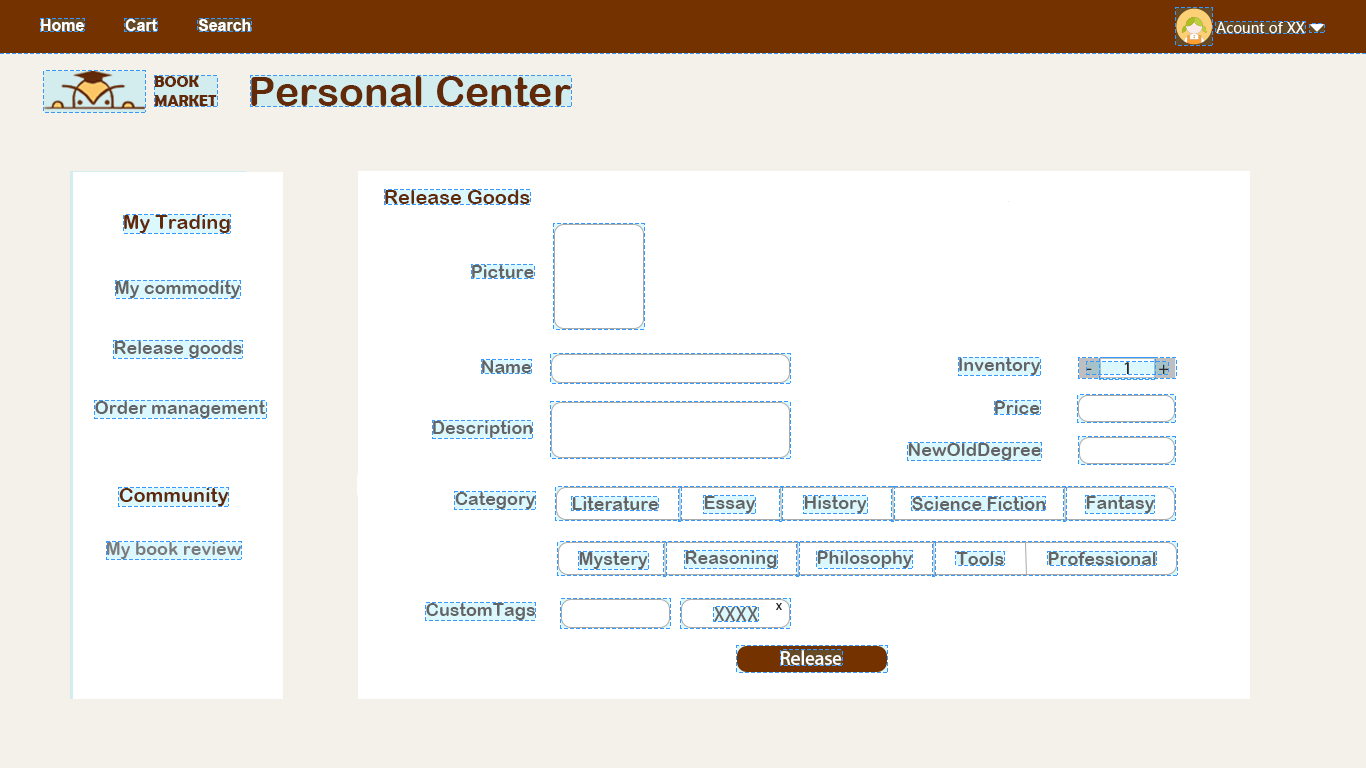
<style>
.page{position:relative;width:1366px;height:768px;background:#ffffff}
.page>*{position:absolute;margin:0}
.t1{font:16px "Arial-BoldMT";color:#ffffff}
.t2{font:14px "MicrosoftYaHeiUI";color:#ffffff}
.t3{font:15.9px/9.5px "BerlinSansFBDemi-Bold";color:#622a09}
.t4{font:40.9px "ArialRoundedMTBold";color:#622a09}
.t5{font:20px "ArialRoundedMTBold";color:#622a09}
.t6{font:18px "ArialRoundedMTBold";color:#656464}
.t7{font:15.3px "AdobeHeitiStd-Regular";color:#2a2a2a}
.t8{font:18px "ArialRoundedMTBold";color:#7c7b7b}
.t9{font:12px "AdobeHeitiStd-Regular";color:#2a2a2a}
.t10{font:18px "AdobeHeitiStd-Regular";color:#656464}
.t11{font:18px "AdobeHeitiStd-Regular";color:#ffffff}
</style>
<div class="page">
<p class="t1" style="left:41px;top:19px;width:43px;height:12px">Home</p>
<p class="t1" style="left:125px;top:19px;width:32px;height:12px">Cart</p>
<p class="t1" style="left:198px;top:19px;width:53px;height:12px">Search</p>
<p class="t2" style="left:1216px;top:22px;width:89px;height:11px">Acount of XX</p>
<p class="t3" style="left:155px;top:76px;width:62px;height:30px">BOOK <br><br>MARKET</p>
<p class="t4" style="left:251px;top:76px;width:320px;height:30px">Personal Center</p>
<p class="t5" style="left:385px;top:190px;width:145px;height:14px">Release Goods</p>
<p class="t5" style="left:124px;top:215px;width:106px;height:18px">My Trading</p>
<p class="t6" style="left:472px;top:265px;width:62px;height:13px">Picture</p>
<p class="t6" style="left:116px;top:281px;width:124px;height:17px">My commodity</p>
<p class="t6" style="left:114px;top:341px;width:128px;height:17px">Release goods</p>
<p class="t6" style="left:482px;top:360px;width:49px;height:13px">Name</p>
<p class="t6" style="left:959px;top:358px;width:81px;height:17px">Inventory</p>
<p class="t7" style="left:1087px;top:362px;width:81px;height:12px">-       1        +</p>
<p class="t6" style="left:95px;top:401px;width:171px;height:17px">Order management</p>
<p class="t6" style="left:995px;top:401px;width:45px;height:13px">Price</p>
<p class="t6" style="left:433px;top:421px;width:99px;height:17px">Description</p>
<p class="t6" style="left:908px;top:443px;width:133px;height:17px">NewOldDegree</p>
<p class="t5" style="left:119px;top:488px;width:109px;height:18px">Community</p>
<p class="t6" style="left:455px;top:492px;width:80px;height:17px">Category</p>
<p class="t6" style="left:572px;top:497px;width:86px;height:13px">Literature</p>
<p class="t6" style="left:704px;top:496px;width:51px;height:17px">Essay</p>
<p class="t6" style="left:804px;top:496px;width:63px;height:17px">History</p>
<p class="t6" style="left:912px;top:497px;width:133px;height:13px">Science Fiction</p>
<p class="t6" style="left:1086px;top:496px;width:68px;height:17px">Fantasy</p>
<p class="t8" style="left:107px;top:542px;width:134px;height:17px">My book review</p>
<p class="t6" style="left:579px;top:552px;width:69px;height:17px">Mystery</p>
<p class="t6" style="left:685px;top:551px;width:92px;height:17px">Reasoning</p>
<p class="t6" style="left:817px;top:551px;width:95px;height:17px">Philosophy</p>
<p class="t6" style="left:956px;top:552px;width:48px;height:13px">Tools</p>
<p class="t6" style="left:1048px;top:552px;width:108px;height:13px">Professional</p>
<p class="t6" style="left:426px;top:603px;width:109px;height:17px">CustomTags</p>
<p class="t9" style="left:776px;top:603px;width:6px;height:7px">x</p>
<p class="t10" style="left:714px;top:607px;width:44px;height:14px">XXXX</p>
<p class="t11" style="left:781px;top:650px;width:61px;height:15px">Release</p>
</div>
